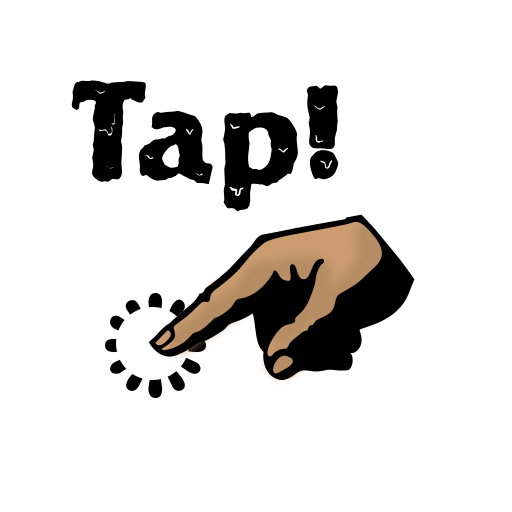
<style>
.page{position:relative;width:512px;height:512px;background:#ffffff}
.page>*{position:absolute;margin:0}
.t1{font:124.6px "SolidOoky";color:#000000}
</style>
<div class="page">
<p class="t1" style="left:71px;top:80px;width:268px;height:132px">Tap!</p>
</div>
